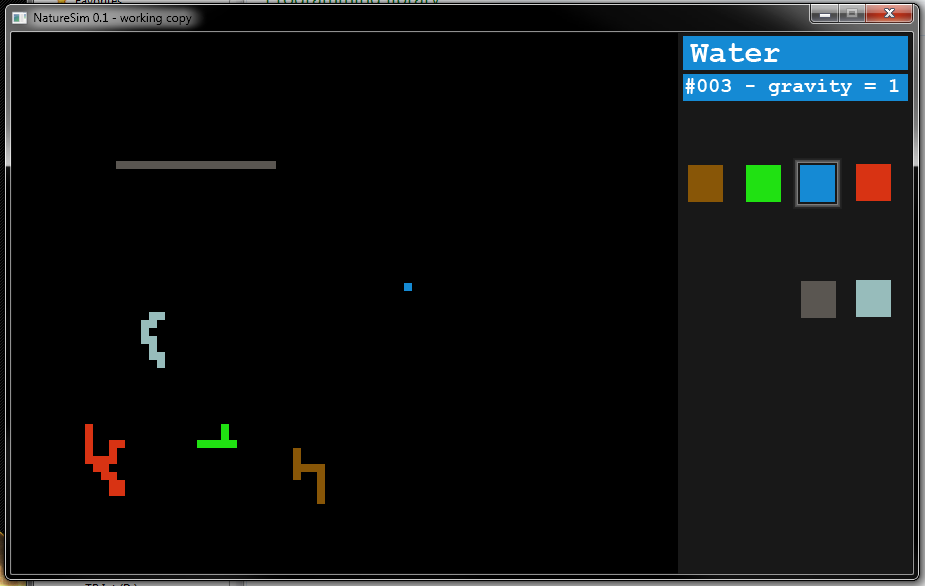
<style>
.page{position:relative;width:925px;height:586px;background:#000000}
.page>*{position:absolute;margin:0}
.t1{font:30px "CourierNewPS-BoldMT";color:#ffffff}
.t2{font:20px "CourierNewPS-BoldMT";color:#ffffff}
</style>
<div class="page">
<p class="t1" style="left:690px;top:43px;width:90px;height:19px">Water</p>
<p class="t2" style="left:685px;top:78px;width:214px;height:18px">#003 - gravity = 1</p>
</div>
